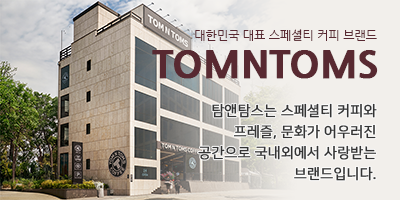
<style>
.page{position:relative;width:400px;height:200px;background:#f2efeb}
.page>*{position:absolute;margin:0}
.t1{font:12px "NanumGothic";color:#582931}
.t2{font:37.8px "NanumGothicExtraBold";color:#582931;text-transform:uppercase;font-weight:bold}
.t3{font:14px/21px "NanumSquareR";color:#333333;text-transform:uppercase;font-weight:bold}
</style>
<div class="page">
<p class="t1" style="left:195px;top:29px;width:182px;height:12px">대한민국 대표 스페셜티 커피 브랜드</p>
<p class="t2" style="left:152px;top:50px;width:226px;height:29px">tomntoms</p>
<p class="t3" style="left:198px;top:103px;width:179px;height:78px;text-align:right">탐앤탐스는 스페셜티 커피와 프레즐, 문화가 어우러진 공간으로 국내외에서 사랑받는 브랜드입니다.</p>
</div>
